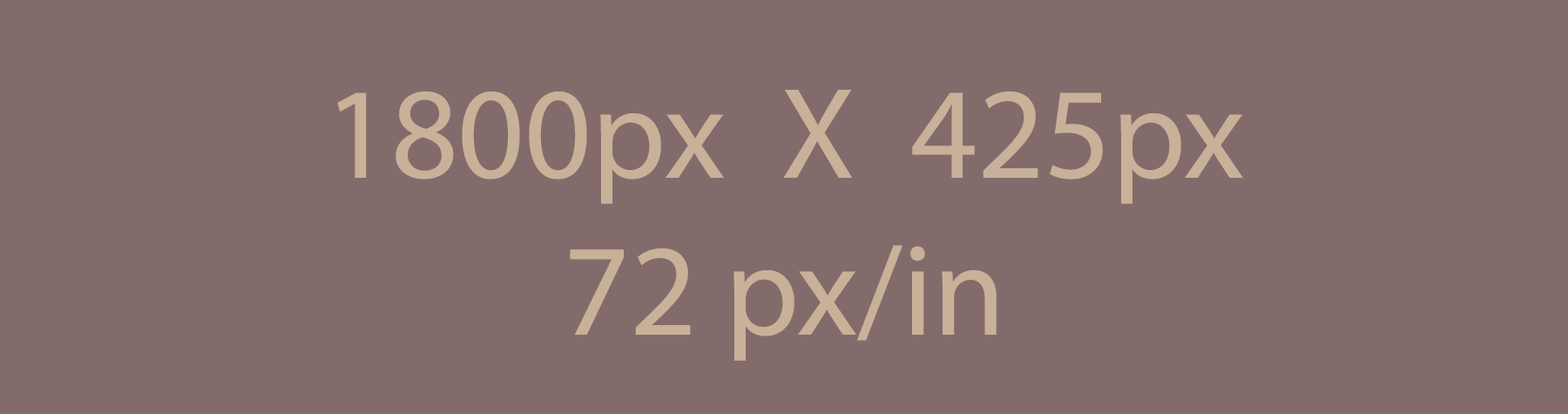
<style>
.page{position:relative;width:1568px;height:414px;background:#846b6b}
.page>*{position:absolute;margin:0}
.t1{font:130.7px "MyriadPro-Regular";color:#c7b299}
</style>
<div class="page">
<p class="t1" style="left:337px;top:90px;width:906px;height:271px;text-align:center">1800px  X  425px<br>72 px/in</p>
</div>
